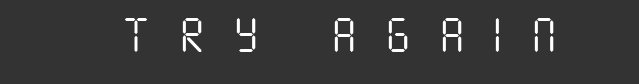
<style>
.page{position:relative;width:639px;height:84px;background:#333333}
.page>*{position:absolute;margin:0}
.t1{font:48px "SevenSegmentRegular";letter-spacing:0.62em;color:#ffffff}
</style>
<div class="page">
<p class="t1" style="left:125px;top:18px;width:429px;height:34px">TRY AGAIN</p>
</div>
